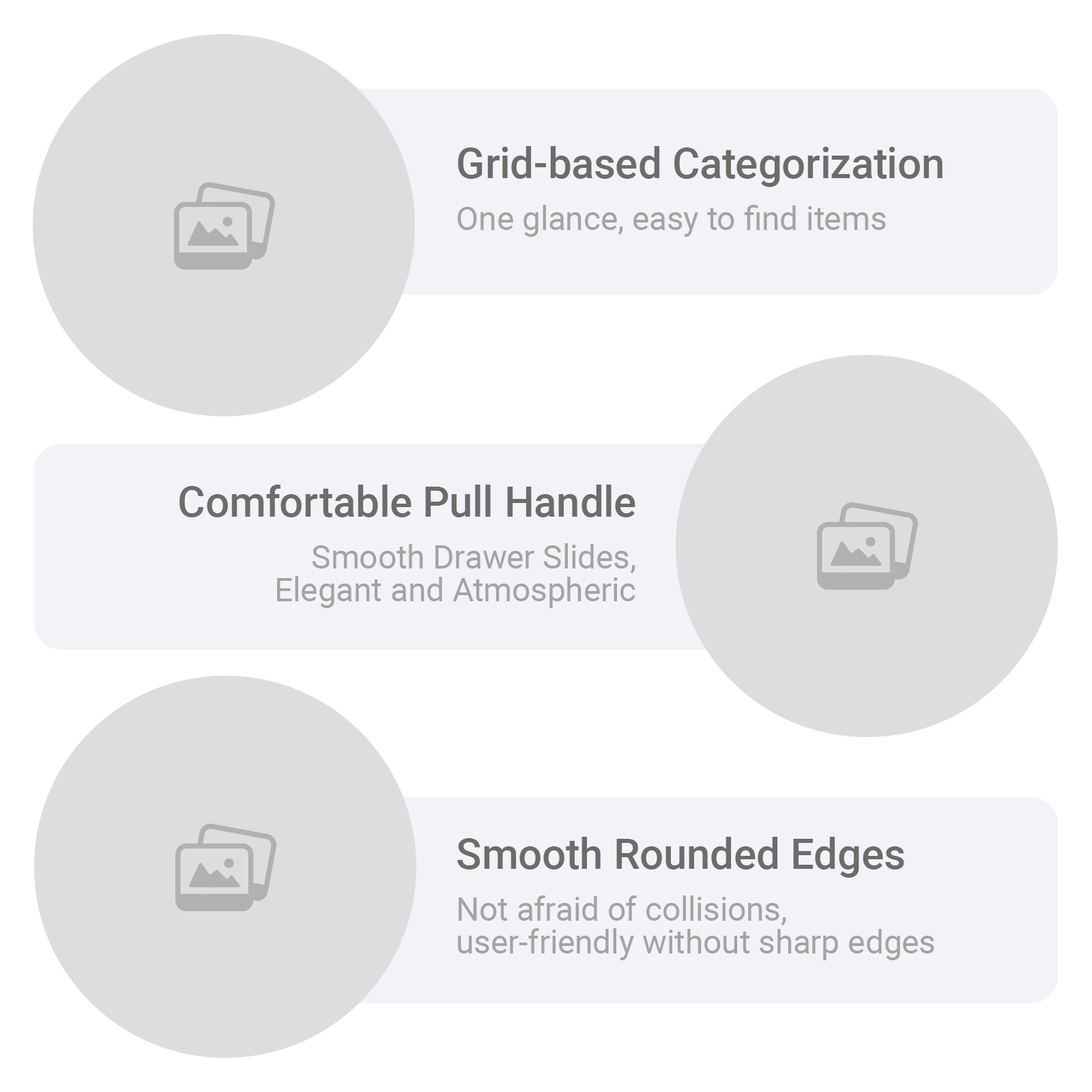
<style>
.page{position:relative;width:1092px;height:1092px;background:#ffffff}
.page>*{position:absolute;margin:0}
.t1{font:42.2px "Roboto-Medium";color:#6c6c6c}
.t2{font:32.8px "Roboto-Regular";color:#a3a3a3}
.t3{font:32.8px/32.8px "Roboto-Regular";color:#a3a3a3}
</style>
<div class="page">
<p class="t1" style="left:458px;top:146px;width:485px;height:41px">Grid-based Categorization</p>
<p class="t2" style="left:457px;top:205px;width:429px;height:32px">One glance, easy to find items</p>
<p class="t1" style="left:179px;top:485px;width:456px;height:32px">Comfortable Pull Handle</p>
<p class="t3" style="left:277px;top:543px;width:358px;height:65px;text-align:right">Smooth Drawer Slides,<br> Elegant and Atmospheric</p>
<p class="t1" style="left:457px;top:837px;width:447px;height:41px">Smooth Rounded Edges</p>
<p class="t3" style="left:458px;top:895px;width:476px;height:65px">Not afraid of collisions, <br>user-friendly without sharp edges</p>
</div>
